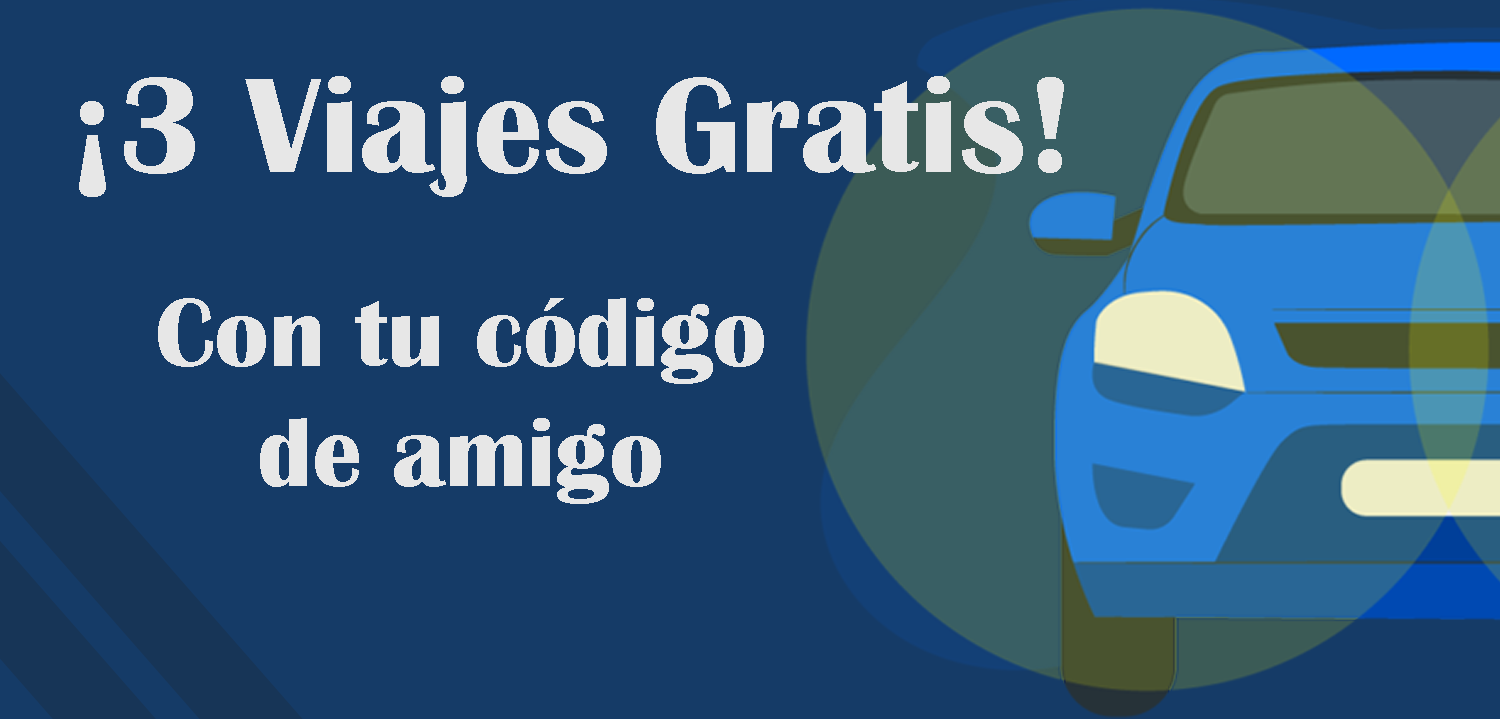
<style>
.page{position:relative;width:1500px;height:719px;background:#153b67}
.page>*{position:absolute;margin:0}
.t1{font:140px "BritannicBold";color:#e7e7e7}
.t2{font:100px "BritannicBold";color:#e7e7e7}
</style>
<div class="page">
<p class="t1" style="left:79px;top:76px;width:985px;height:121px">¡3 Viajes Gratis!</p>
<p class="t2" style="left:158px;top:298px;width:606px;height:206px;text-align:center">Con tu código<br>de amigo</p>
</div>
